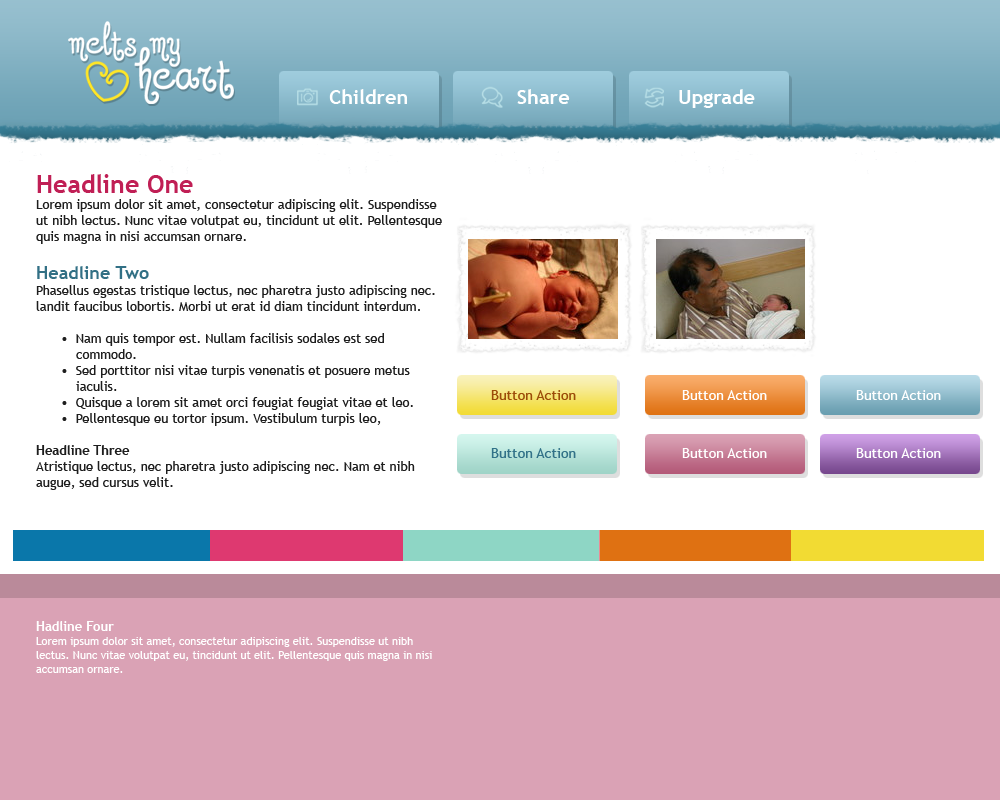
<style>
.page{position:relative;width:1000px;height:800px;background:#ffffff}
.page>*{position:absolute;margin:0}
.t1{font:20px "TrebuchetMS-Bold";color:#ffffff}
.t2{font:13px/16px "TrebuchetMS";color:#1e1e1e}
.t3{font:25px/19px "TrebuchetMS-Bold";color:#c01f55}
.t4{font:18px/19px "TrebuchetMS-Bold";color:#327085}
.t5{font:13px/16px "TrebuchetMS-Bold";color:#1e1e1e}
.t6{font:14px "TrebuchetMS";color:#9c4d09}
.t7{font:14px "TrebuchetMS";color:#ffffff}
.t8{font:14px "TrebuchetMS";color:#327288}
.t9{font:11px/14px "TrebuchetMS";color:#ffffff}
.t10{font:13px/14px "TrebuchetMS-Bold";color:#ffffff}
</style>
<div class="page">
<p class="t1" style="left:329px;top:89px;width:426px;height:19px">Children                  Share                  Upgrade</p>
<p class="t2" style="left:36px;top:174px;width:406px;height:316px"><span class="t3">Headline One<br></span>Lorem ipsum dolor sit amet, consectetur adipiscing elit. Suspendisse ut nibh lectus. Nunc vitae volutpat eu, tincidunt ut elit. Pellentesque quis magna in nisi accumsan ornare. <br><br><span class="t4">Headline Two<br></span>Phasellus egestas tristique lectus, nec pharetra justo adipiscing nec. landit faucibus lobortis. Morbi ut erat id diam tincidunt interdum. <br><br>•  Nam quis tempor est. Nullam facilisis sodales est sed commodo. <br>•  Sed porttitor nisi vitae turpis venenatis et posuere metus iaculis. <br>•  Quisque a lorem sit amet orci feugiat feugiat vitae et leo. <br>•  Pellentesque eu tortor ipsum. Vestibulum turpis leo,<br><br><span class="t5">Headline Three<br></span>Atristique lectus, nec pharetra justo adipiscing nec. Nam et nibh augue, sed cursus velit.</p>
<p class="t6" style="left:491px;top:390px;width:85px;height:10px">Button Action</p>
<p class="t7" style="left:682px;top:390px;width:85px;height:10px">Button Action</p>
<p class="t7" style="left:856px;top:390px;width:85px;height:10px">Button Action</p>
<p class="t8" style="left:491px;top:448px;width:85px;height:10px">Button Action</p>
<p class="t7" style="left:682px;top:448px;width:85px;height:10px">Button Action</p>
<p class="t7" style="left:856px;top:448px;width:85px;height:10px">Button Action</p>
<p class="t9" style="left:36px;top:621px;width:396px;height:52px"><span class="t10">Hadline Four<br></span>Lorem ipsum dolor sit amet, consectetur adipiscing elit. Suspendisse ut nibh lectus. Nunc vitae volutpat eu, tincidunt ut elit. Pellentesque quis magna in nisi accumsan ornare.</p>
</div>
